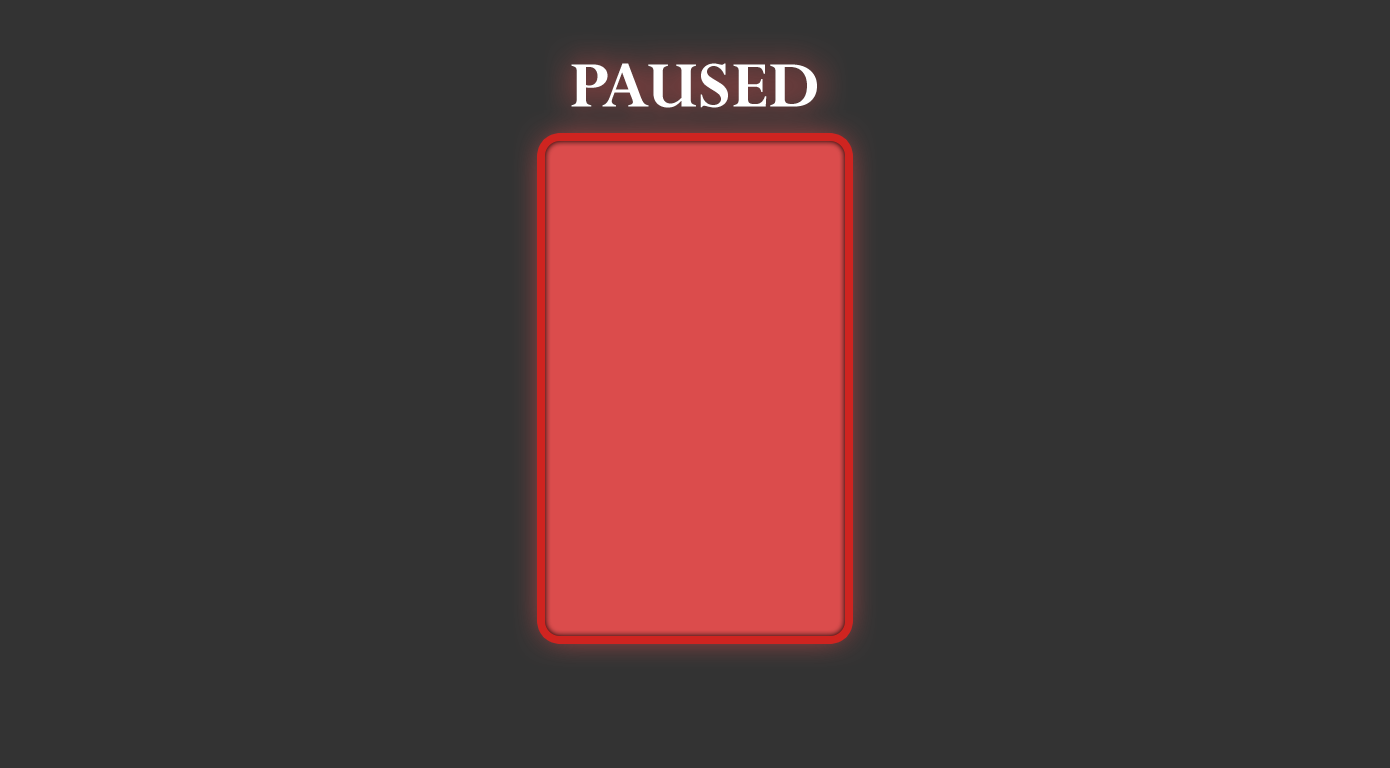
<style>
.page{position:relative;width:1390px;height:768px;background:#333333}
.page>*{position:absolute;margin:0}
.t1{font:72px "Perpetua-Bold";color:#ffffff}
</style>
<div class="page">
<p class="t1" style="left:571px;top:63px;width:246px;height:45px">PAUSED</p>
</div>
